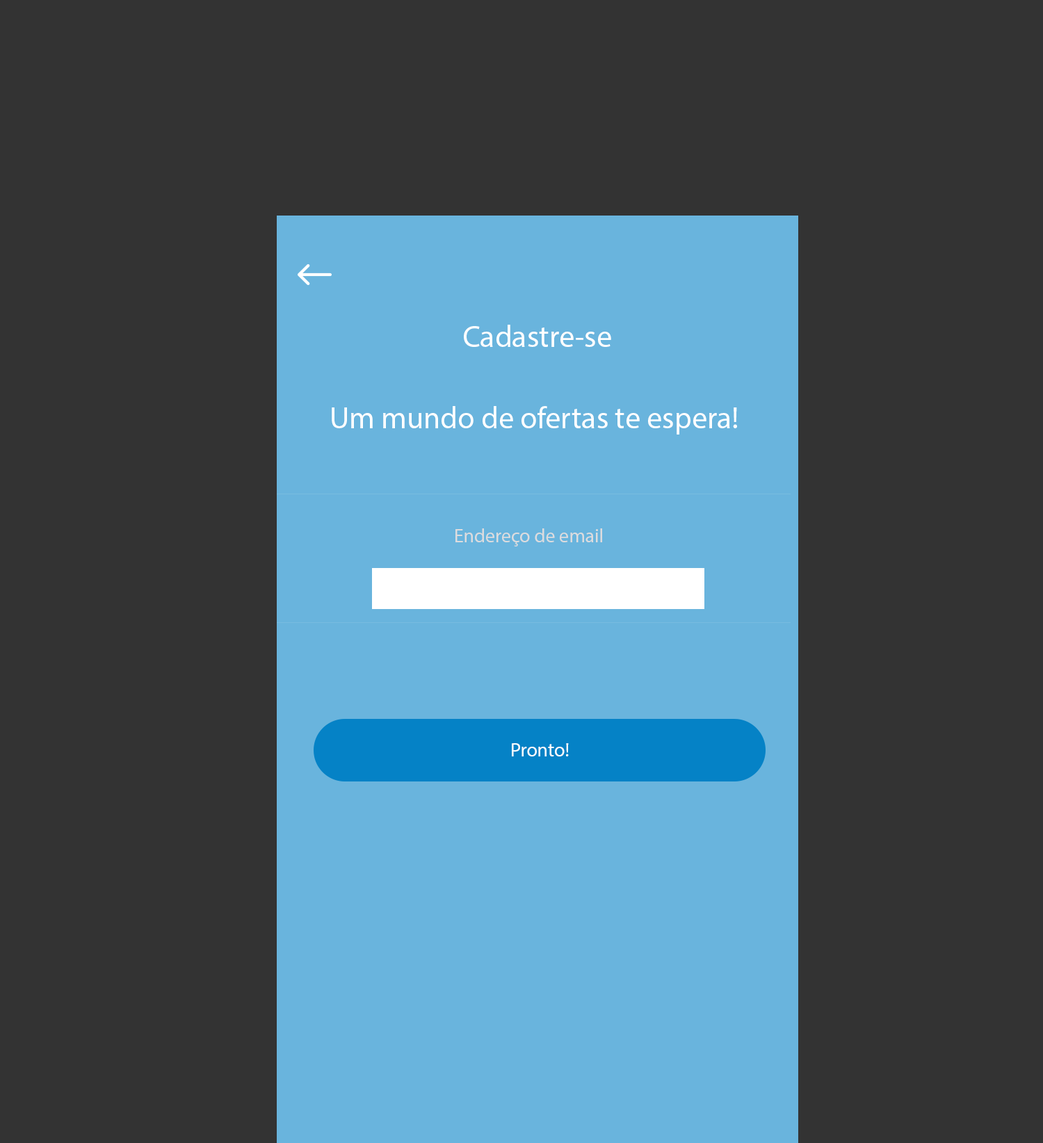
<style>
.page{position:relative;width:1043px;height:1143px;background:#333333}
.page>*{position:absolute;margin:0}
.t1{font:30.6px "MyriadPro-Regular";color:#ffffff}
.t2{font:19.5px "MyriadPro-Regular";color:#dcdcde}
.t3{font:19.5px "MyriadPro-Regular";color:#ffffff}
</style>
<div class="page">
<p class="t1" style="left:464px;top:325px;width:147px;height:22px">Cadastre-se</p>
<p class="t1" style="left:332px;top:406px;width:405px;height:29px">Um mundo de ofertas te espera!</p>
<p class="t2" style="left:455px;top:528px;width:147px;height:19px">Endereço de email</p>
<p class="t3" style="left:512px;top:743px;width:57px;height:14px">Pronto!</p>
</div>
